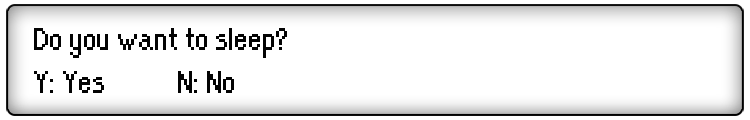
<style>
.page{position:relative;width:750px;height:120px;background:#ffffff}
.page>*{position:absolute;margin:0}
.t1{font:36px "OrangeKid-Regular";color:#030303}
</style>
<div class="page">
<p class="t1" style="left:34px;top:28px;width:253px;height:65px">Do you want to sleep?<br>Y: Yes  N: No</p>
</div>
